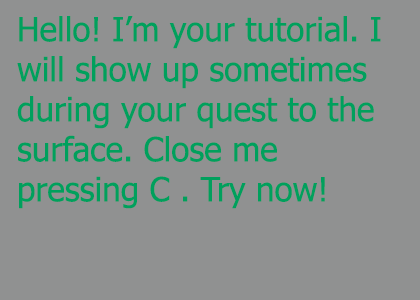
<style>
.page{position:relative;width:420px;height:300px;background:#909191}
.page>*{position:absolute;margin:0}
.t1{font:33.3px "Tahoma";color:#00a05d}
</style>
<div class="page">
<p class="t1" style="left:17px;top:16px;width:364px;height:193px">Hello! I’m your tutorial. I will show up sometimes during your quest to the surface. Close me pressing C . Try now!</p>
</div>
